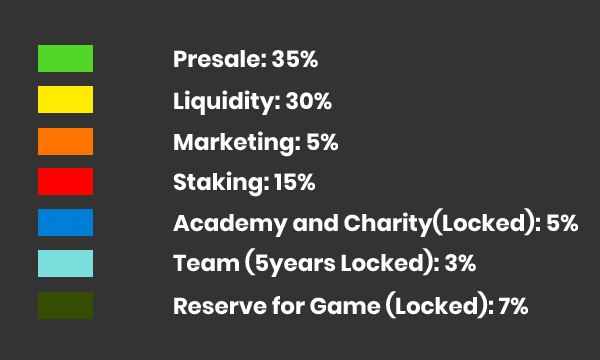
<style>
.page{position:relative;width:600px;height:360px;background:#333333}
.page>*{position:absolute;margin:0}
.t1{font:22.9px "Poppins-Bold";color:#ffffff}
</style>
<div class="page">
<p class="t1" style="left:174px;top:50px;width:144px;height:18px">Presale: 35%</p>
<p class="t1" style="left:174px;top:90px;width:158px;height:25px">Liquidity: 30%</p>
<p class="t1" style="left:174px;top:131px;width:164px;height:26px">Marketing: 5%</p>
<p class="t1" style="left:173px;top:171px;width:142px;height:26px">Staking: 15%</p>
<p class="t1" style="left:173px;top:208px;width:405px;height:29px">Academy and Charity(Locked): 5%</p>
<p class="t1" style="left:173px;top:248px;width:303px;height:29px">Team (5years Locked): 3%</p>
<p class="t1" style="left:174px;top:291px;width:354px;height:28px">Reserve for Game (Locked): 7%</p>
</div>
